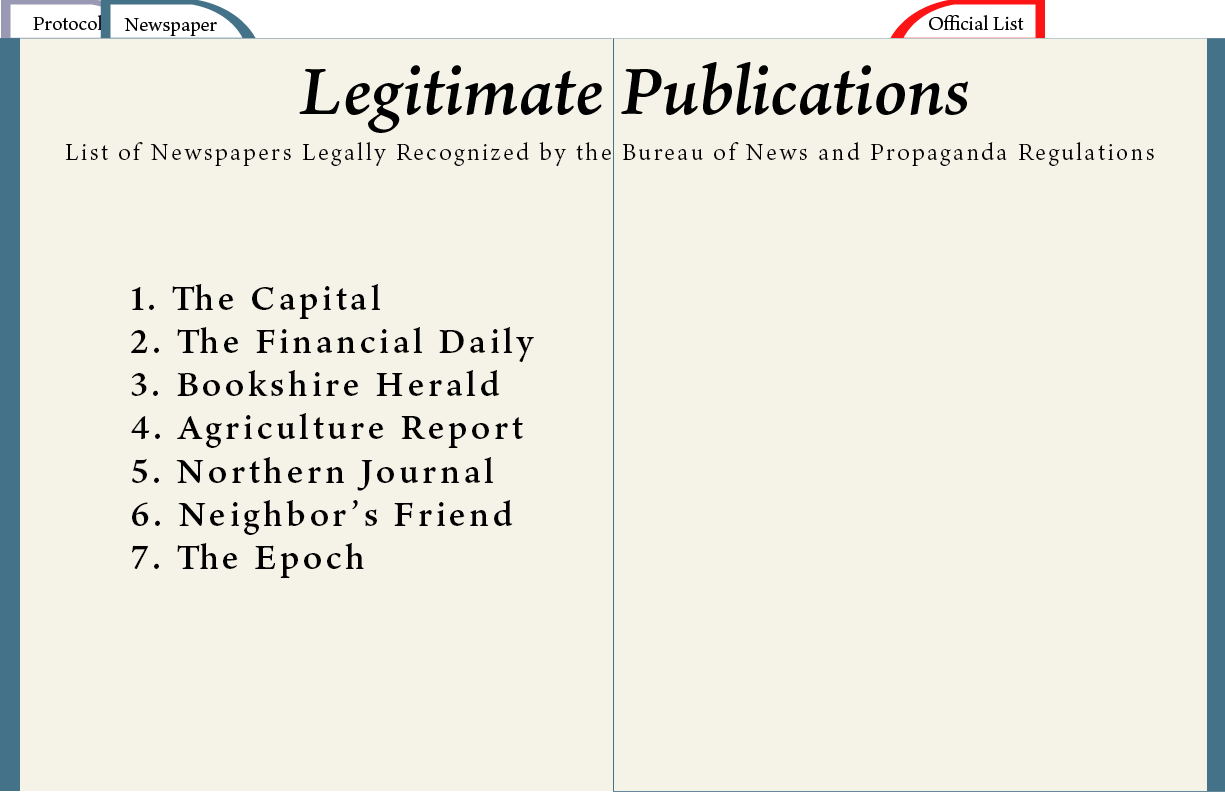
<style>
.page{position:relative;width:1225px;height:792px;background:#f5f2e8}
.page>*{position:absolute;margin:0}
.t1{font:24px "TenOldstyle-Regular";letter-spacing:0.1em;color:#000000}
.t2{font:36px "TenOldstyle-Semibold";letter-spacing:0.1em;color:#000000}
</style>
<div class="page">
<p class="t1" style="left:65px;top:142px;width:1089px;height:24px">List of Newspapers Legally Recognized by the Bureau of News and Propaganda Regulations</p>
<p class="t2" style="left:131px;top:284px;width:403px;height:294px">1. The Capital<br>2. The Financial Daily<br>3. Bookshire Herald<br>4. Agriculture Report<br>5. Northern Journal<br>6. Neighbor’s Friend<br>7. The Epoch</p>
</div>
